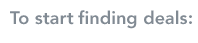
<style>
.page{position:relative;width:198px;height:43px;background:#ffffff}
.page>*{position:absolute;margin:0}
.t1{font:18px "Avenir-Heavy";letter-spacing:0.005em;color:#818a93}
</style>
<div class="page">
<p class="t1" style="left:10px;top:10px;width:182px;height:19px">To start finding deals:</p>
</div>
